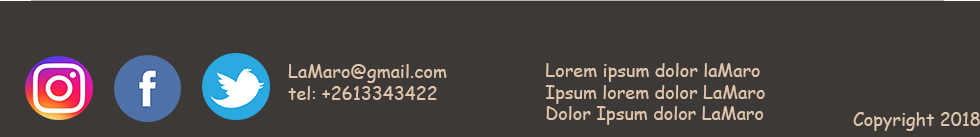
<style>
.page{position:relative;width:980px;height:137px;background:#3d3937}
.page>*{position:absolute;margin:0}
.t1{font:18px "ComicSansMS";color:#e0c5ad}
</style>
<div class="page">
<p class="t1" style="left:288px;top:64px;width:159px;height:36px">LaMaro@gmail.com<br>tel: +2613343422</p>
<p class="t1" style="left:545px;top:63px;width:220px;height:62px">Lorem ipsum dolor laMaro<br>Ipsum lorem dolor LaMaro<br>Dolor Ipsum dolor LaMaro</p>
<p class="t1" style="left:853px;top:112px;width:127px;height:19px">Copyright 2018</p>
</div>
